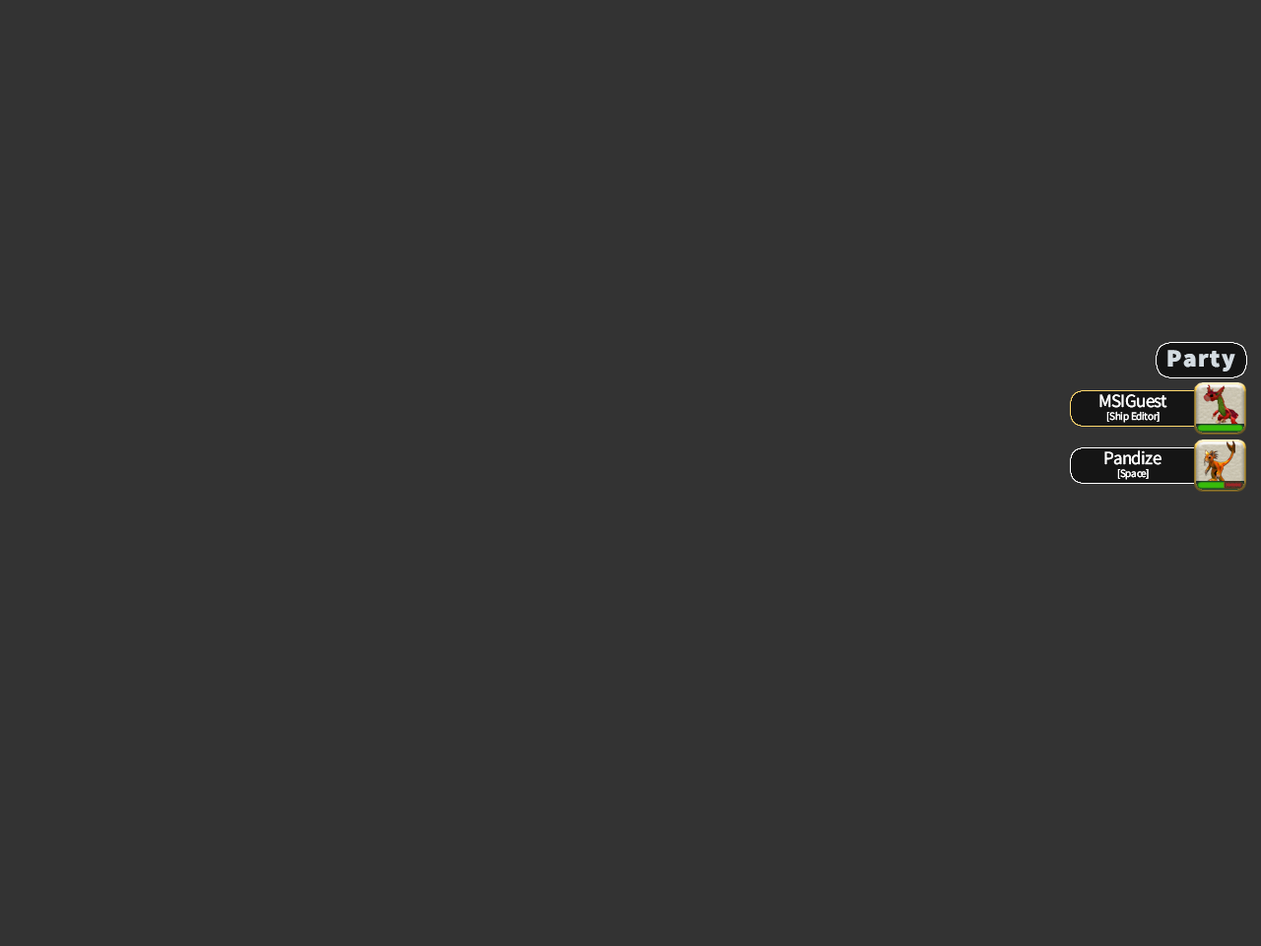
<style>
.page{position:relative;width:1261px;height:946px;background:#333333}
.page>*{position:absolute;margin:0}
.t1{font:24.8px "SourceSansRoman-Black";letter-spacing:0.072em;color:#d4dce2}
.t2{font:18.6px "SourceSansRoman-Regular";letter-spacing:-0.028em;color:#ffffff}
.t3{font:11px "SourceSansRoman-Regular";letter-spacing:-0.028em;color:#ffffff}
</style>
<div class="page">
<p class="t1" style="left:1167px;top:350px;width:68px;height:21px">Party</p>
<p class="t2" style="left:1099px;top:394px;width:68px;height:14px">MSIGuest</p>
<p class="t3" style="left:1106px;top:411px;width:53px;height:12px">[Ship Editor]</p>
<p class="t2" style="left:1104px;top:450px;width:57px;height:15px">Pandize</p>
<p class="t3" style="left:1117px;top:469px;width:32px;height:11px">[Space]</p>
</div>
